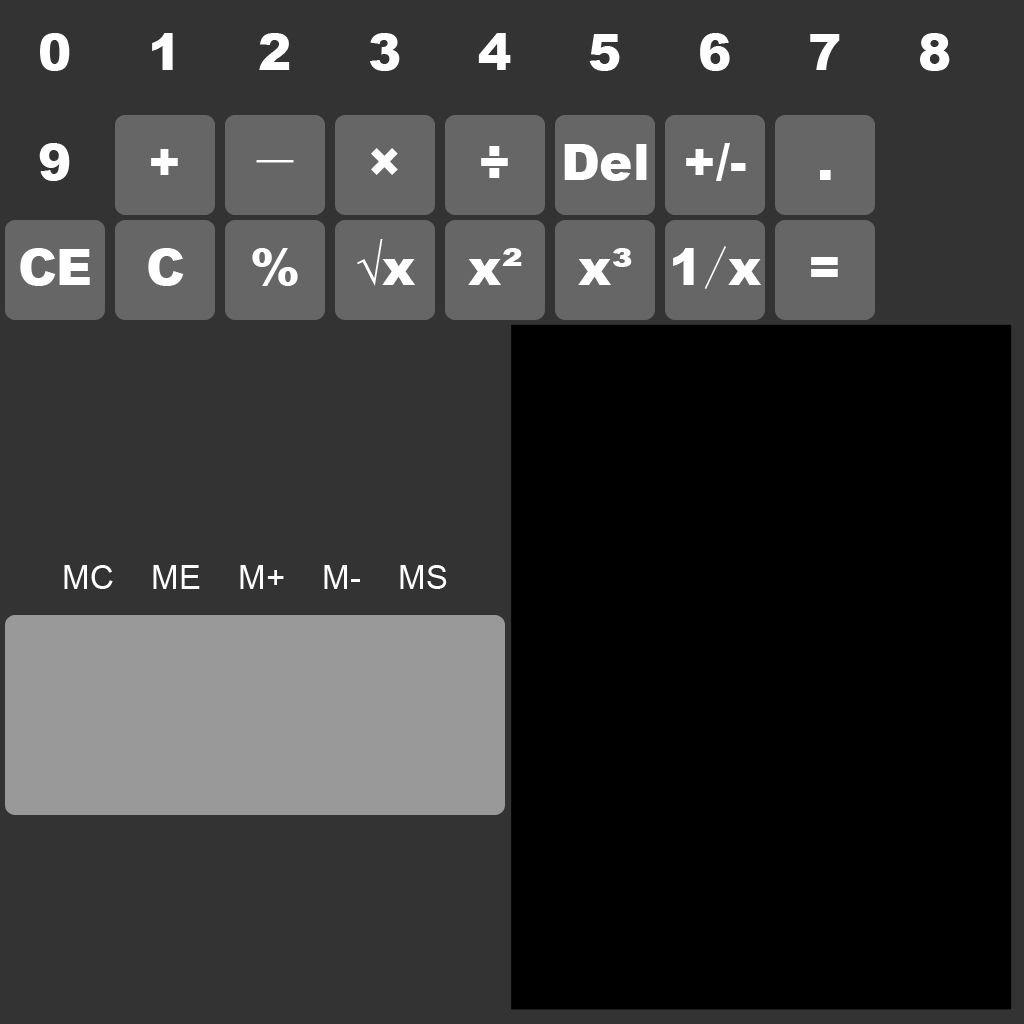
<style>
.page{position:relative;width:1024px;height:1024px;background:#333333}
.page>*{position:absolute;margin:0}
.t1{font:50px "Arial-Black";color:#ffffff}
.t2{font:50px "SimSun";color:#ffffff}
.t3{font:33.3px "ArialMT";color:#ffffff}
</style>
<div class="page">
<p class="t1" style="left:40px;top:33px;width:30px;height:38px">0</p>
<p class="t1" style="left:152px;top:33px;width:21px;height:37px">1</p>
<p class="t1" style="left:259px;top:33px;width:31px;height:37px">2</p>
<p class="t1" style="left:369px;top:33px;width:31px;height:38px">3</p>
<p class="t1" style="left:478px;top:33px;width:33px;height:37px">4</p>
<p class="t1" style="left:589px;top:34px;width:31px;height:37px">5</p>
<p class="t1" style="left:700px;top:33px;width:30px;height:38px">6</p>
<p class="t1" style="left:810px;top:34px;width:30px;height:36px">7</p>
<p class="t1" style="left:920px;top:33px;width:30px;height:38px">8</p>
<p class="t1" style="left:39px;top:143px;width:31px;height:38px">9</p>
<p class="t1" style="left:151px;top:149px;width:27px;height:26px">+</p>
<p class="t1" style="left:371px;top:148px;width:27px;height:27px">×</p>
<p class="t1" style="left:481px;top:146px;width:27px;height:32px">÷</p>
<p class="t1" style="left:564px;top:144px;width:83px;height:37px">Del</p>
<p class="t1" style="left:686px;top:143px;width:60px;height:38px">+/-</p>
<p class="t2" style="left:256px;top:160px;width:38px;height:3px">－</p>
<p class="t1" style="left:820px;top:170px;width:11px;height:10px">.</p>
<p class="t1" style="left:357px;top:239px;width:58px;height:47px">√x</p>
<p class="t1" style="left:673px;top:246px;width:88px;height:43px">1<span class="t2">/</span>x</p>
<p class="t1" style="left:20px;top:248px;width:70px;height:38px">CE</p>
<p class="t1" style="left:148px;top:248px;width:36px;height:38px">C</p>
<p class="t1" style="left:252px;top:248px;width:46px;height:38px">%</p>
<p class="t1" style="left:468px;top:248px;width:54px;height:37px">x²</p>
<p class="t1" style="left:578px;top:248px;width:54px;height:37px">x³</p>
<p class="t1" style="left:811px;top:257px;width:27px;height:20px">=</p>
<p class="t3" style="left:64px;top:565px;width:383px;height:24px">MC    ME    M+    M-    MS</p>
</div>
